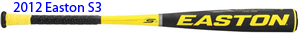
<style>
.page{position:relative;width:300px;height:34px;background:#ffffff}
.page>*{position:absolute;margin:0}
.t1{font:14px "MyriadPro-Regular";color:#0000ff}
</style>
<div class="page">
<p class="t1" style="left:13px;top:2px;width:88px;height:10px">2012 Easton S3</p>
</div>
